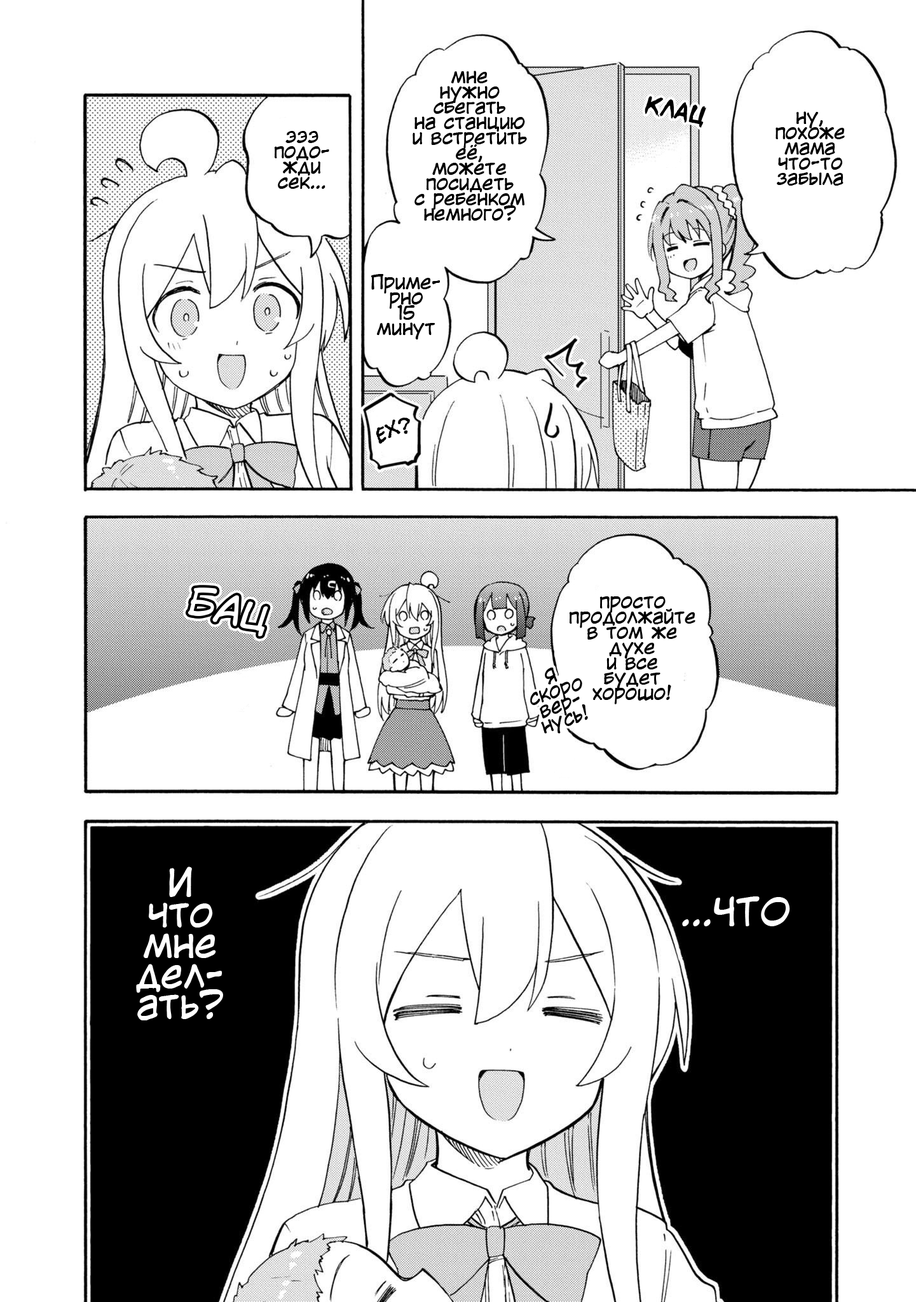
<style>
.page{position:relative;width:916px;height:1302px;background:#ffffff}
.page>*{position:absolute;margin:0}
.t1{font:19.1px/15.3px "KuraiVoice2";color:#000000}
.t2{font:22.9px "d_CCTimSaleBrush-Italic";color:#000000}
.t3{font:22.9px "el_CCEvilSchemes";color:#000000}
.t4{font:38.1px "KuraiVoice2";color:#ffffff}
.t5{font:38.1px/30.5px "KuraiVoice2";color:#ffffff}
</style>
<div class="page">
<p class="t1" style="left:413px;top:71px;width:114px;height:150px;text-align:center">мне<br>нужно<br>сбегать<br>на станцию<br>и встретить<br>её,<br>можете<br>посидеть<br>с ребенком<br>немного?</p>
<p class="t2" style="left:645px;top:96px;width:61px;height:32px;rotate:11deg">КЛАЦ</p>
<p class="t1" style="left:775px;top:111px;width:70px;height:75px;text-align:center">ну,<br>похоже<br>мама<br>что-то<br>забыла</p>
<p class="t1" style="left:274px;top:131px;width:55px;height:58px;text-align:center">эээ<br>подо-<br>жди<br>сек...</p>
<p class="t1" style="left:371px;top:274px;width:69px;height:65px;text-align:center">Приме-<br>рно<br>15<br>минут</p>
<p class="t3" style="left:376px;top:418px;width:34px;height:26px;rotate:-17deg">ЕХ?</p>
<p class="t4" style="left:188px;top:587px;width:80px;height:49px;rotate:16deg">БАЦ</p>
<p class="t1" style="left:569px;top:596px;width:126px;height:108px;text-align:center">просто<br>продолжайте<br>в том же<br>духе<br>и все<br>будет<br>хорошо!</p>
<p class="t1" style="left:530px;top:667px;width:58px;height:67px;text-align:center;rotate:-18deg">Я<br>скоро<br>вер-<br>нусь!</p>
<p class="t5" style="left:136px;top:866px;width:87px;height:154px;text-align:center">И<br>что<br>мне<br>дел-<br>ать?</p>
<p class="t4" style="left:682px;top:896px;width:108px;height:30px">...ЧТО</p>
</div>
